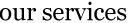
<style>
.page{position:relative;width:128px;height:23px;background:#ffffff}
.page>*{position:absolute;margin:0}
.t1{font:25.1px "Georgia";color:#000000}
</style>
<div class="page">
<p class="t1" style="left:0px;top:1px;width:127px;height:20px">our services</p>
</div>
